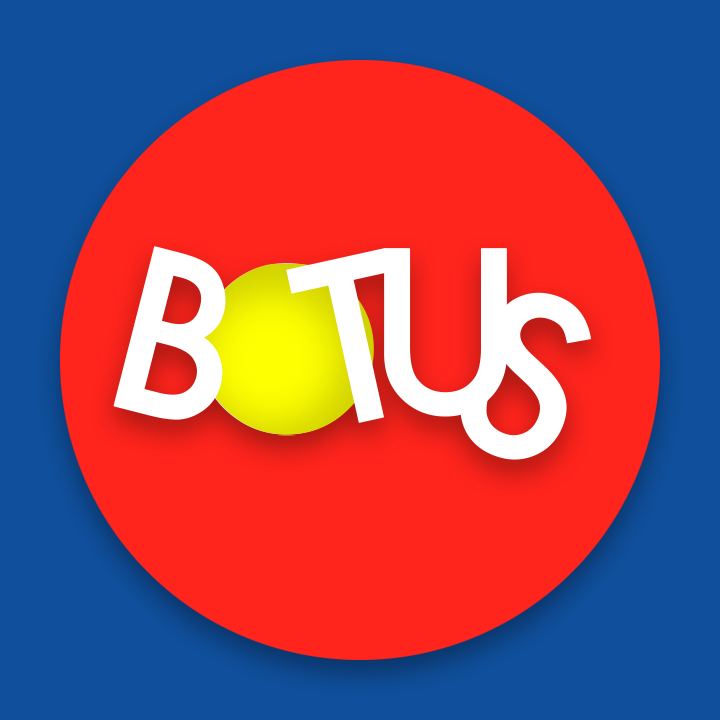
<style>
.page{position:relative;width:720px;height:720px;background:#0f4f9c}
.page>*{position:absolute;margin:0}
.t1{font:217.7px "Futura-Medium";color:#ffffff;font-weight:bold}
</style>
<div class="page">
<p class="t1" style="left:113px;top:246px;width:113px;height:174px;rotate:14deg">B</p>
<p class="t1" style="left:286px;top:248px;width:105px;height:175px;rotate:-12deg">T</p>
<p class="t1" style="left:384px;top:248px;width:123px;height:169px">U</p>
<p class="t1" style="left:460px;top:292px;width:132px;height:168px;rotate:21deg">S</p>
</div>
